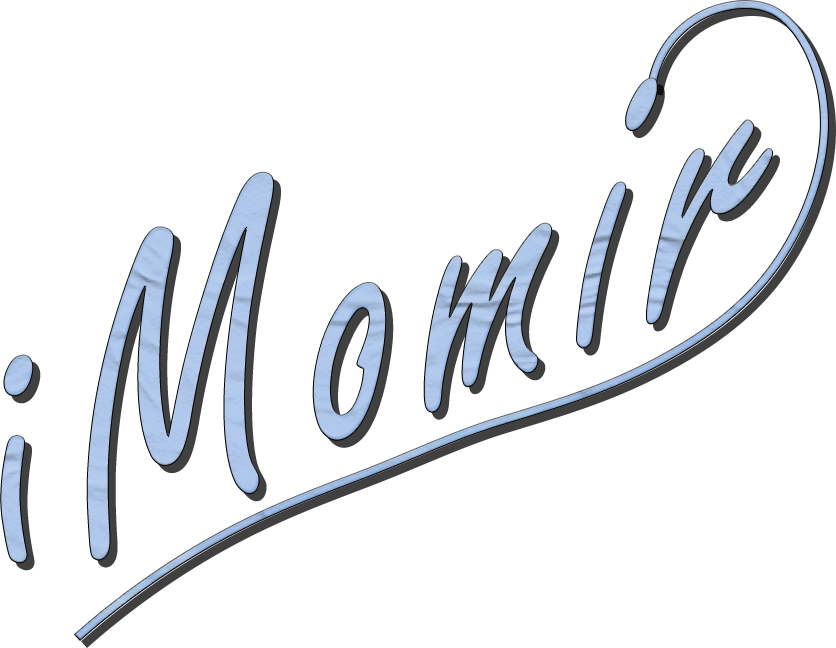
<style>
.page{position:relative;width:836px;height:648px;background:#ffffff}
.page>*{position:absolute;margin:0}
.t1{font:436.7px "FreestyleScript-Regular";letter-spacing:0.05em;color:#adc5e8}
</style>
<div class="page">
<p class="t1" style="left:0px;top:77px;width:773px;height:487px;rotate:-23deg">iMomir</p>
</div>
